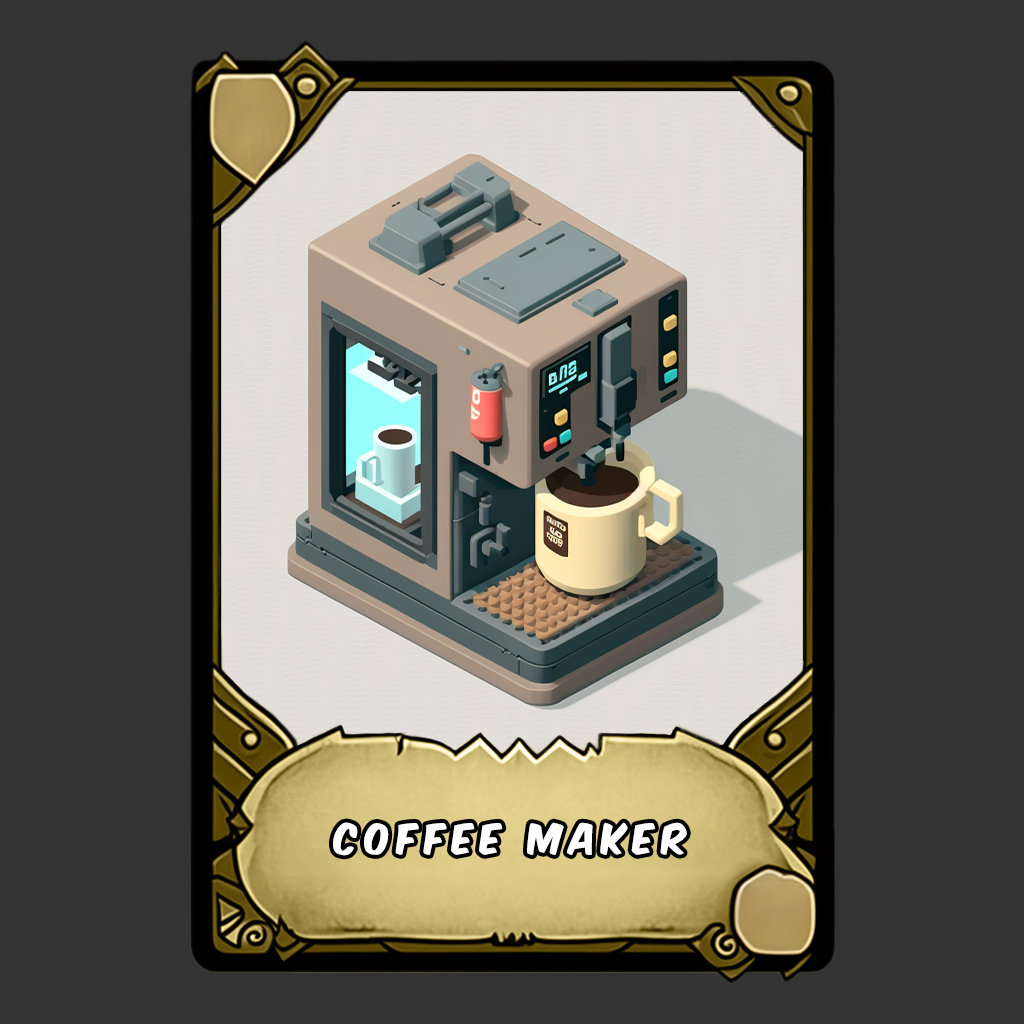
<style>
.page{position:relative;width:1024px;height:1024px;background:#333333}
.page>*{position:absolute;margin:0}
.t1{font:36px "KomikaAxis";letter-spacing:0.2em;color:#ffffff}
</style>
<div class="page">
<p class="t1" style="left:333px;top:822px;width:354px;height:34px">coffee maker</p>
</div>
